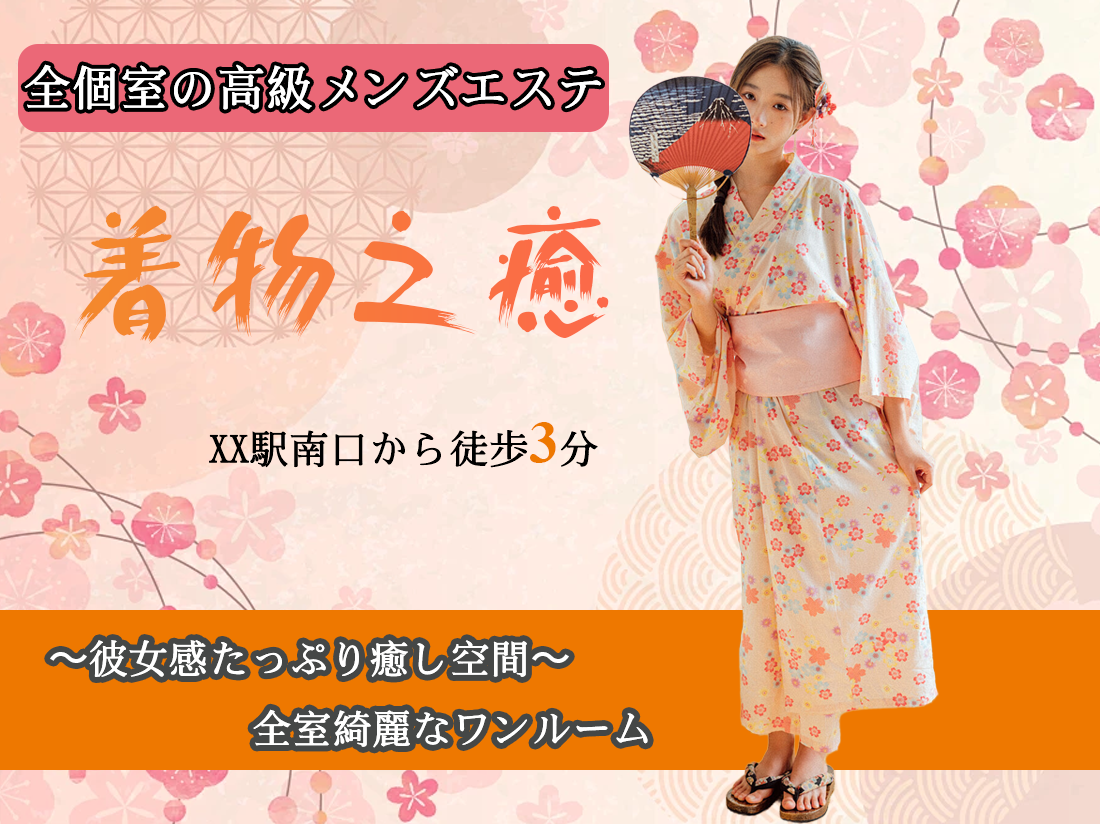
<style>
.page{position:relative;width:1100px;height:824px}
.page>*{position:absolute;margin:0}
.t1{font:48.5px "SimSong-Bold";color:#ffffff}
.t2{font:140px "Hakuu";color:#f77d39}
.t3{font:40px "SimSong-Bold";color:#000000}
.t4{font:60px "TimesNewRomanPS-BoldMT";color:#ee7800}
.t5{font:40.2px "SimSong-Bold";color:#ffffff}
.t6{font:40.2px "AdobeHeitiStd-Regular";color:#ffffff}
.t7{font:40px "SimSong-Bold";color:#ffffff}
</style>
<div class="page">
<p class="t1" style="left:24px;top:64px;width:577px;height:46px">全個室の高級メンズエステ</p>
<p class="t2" style="left:74px;top:205px;width:535px;height:140px">着物之癒</p>
<p class="t3" style="left:209px;top:422px;width:389px;height:46px">XX駅南口から徒歩<span class="t4">3</span>分</p>
<p class="t5" style="left:50px;top:640px;width:519px;height:37px"><span class="t6">〜</span>彼女感たっぷり癒し空間<span class="t6">〜</span></p>
<p class="t7" style="left:253px;top:709px;width:395px;height:39px">全室綺麗なワンルーム</p>
</div>
